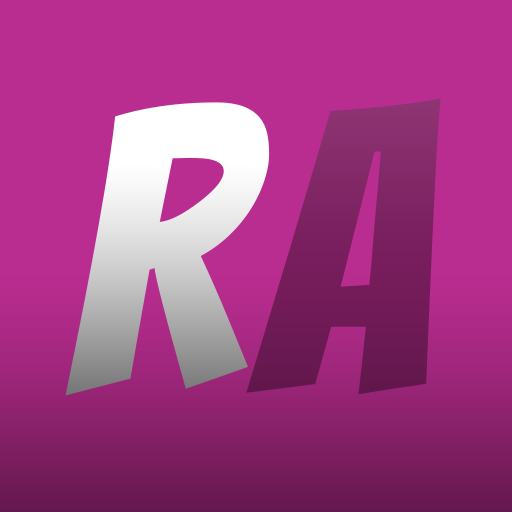
<style>
.page{position:relative;width:512px;height:512px;background:#b92d90}
.page>*{position:absolute;margin:0}
.t1{font:400px "Bangers-Regular";color:#ffffff}
.t2{font:400px "Bangers-Regular";color:#3e3e3e}
</style>
<div class="page">
<p class="t1" style="left:65px;top:102px;width:205px;height:294px">R</p>
<p class="t2" style="left:246px;top:98px;width:195px;height:297px">a</p>
</div>
